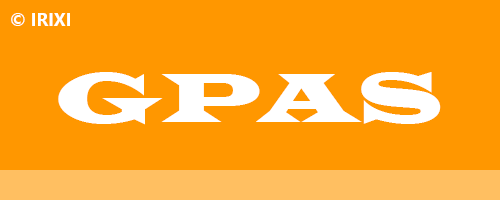
<style>
.page{position:relative;width:500px;height:200px;background:#ff9700}
.page>*{position:absolute;margin:0}
.t1{font:18px "SegoeUI-Bold";color:#ffffff}
.t2{font:72px "LatinWide";color:#ffffff}
</style>
<div class="page">
<p class="t1" style="left:11px;top:13px;width:59px;height:13px">© IRIXI</p>
<p class="t2" style="left:58px;top:72px;width:383px;height:53px">GPAS</p>
</div>
